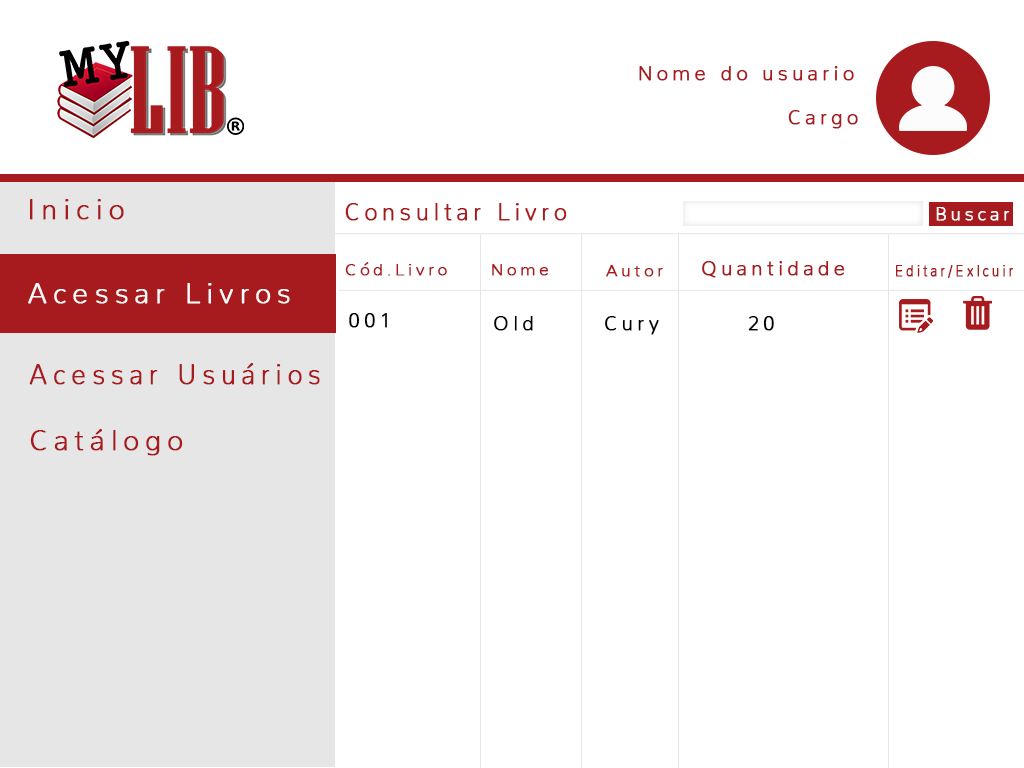
<style>
.page{position:relative;width:1024px;height:768px;background:#ffffff}
.page>*{position:absolute;margin:0}
.t1{font:20px "Nunito-ExtraLight";letter-spacing:0.2em;color:#a71b1e;font-weight:bold}
.t2{font:28px "Nunito-ExtraLight";letter-spacing:0.2em;color:#a71b1e;font-weight:bold}
.t3{font:22.6px "Nunito-ExtraLight";letter-spacing:0.2em;color:#a71b1e;font-weight:bold}
.t4{font:18.1px "Nunito-ExtraLight";letter-spacing:0.2em;color:#fdfdfd;font-weight:bold}
.t5{font:16.3px "Nunito-ExtraLight";letter-spacing:0.2em;color:#a71b1e;font-weight:bold;scale:1.04 1}
.t6{font:16.3px "Nunito-ExtraLight";letter-spacing:0.2em;color:#a71b1e;font-weight:bold;scale:0.82 1}
.t7{font:28px "Nunito-ExtraLight";letter-spacing:0.2em;color:#fbf9f9;font-weight:bold}
.t8{font:20px "Nunito-ExtraLight";letter-spacing:0.2em;color:#010101;font-weight:bold}
.t9{font:28px "Nunito-ExtraLight";letter-spacing:0.2em;color:#a71b1e;font-weight:bold;scale:0.94 1}
</style>
<div class="page">
<p class="t1" style="left:639px;top:66px;width:215px;height:15px">Nome do usuario</p>
<p class="t1" style="left:788px;top:110px;width:70px;height:19px">Cargo</p>
<p class="t2" style="left:30px;top:199px;width:94px;height:21px">Inicio</p>
<p class="t3" style="left:345px;top:203px;width:222px;height:18px">Consultar Livro</p>
<p class="t4" style="left:936px;top:207px;width:74px;height:14px">Buscar</p>
<p class="t5" style="left:345px;top:262px;width:102px;height:14px">Cód.Livro</p>
<p class="t5" style="left:492px;top:264px;width:56px;height:12px">Nome</p>
<p class="t5" style="left:606px;top:265px;width:57px;height:12px">Autor</p>
<p class="t1" style="left:702px;top:261px;width:143px;height:17px">Quantidade</p>
<p class="t6" style="left:896px;top:265px;width:117px;height:13px">Editar/Exlcuir</p>
<p class="t7" style="left:28px;top:283px;width:262px;height:21px">Acessar Livros</p>
<p class="t8" style="left:349px;top:313px;width:38px;height:15px">001</p>
<p class="t8" style="left:494px;top:316px;width:39px;height:15px">Old</p>
<p class="t8" style="left:605px;top:316px;width:54px;height:19px">Cury</p>
<p class="t8" style="left:748px;top:316px;width:26px;height:15px">20</p>
<p class="t9" style="left:29px;top:363px;width:291px;height:22px">Acessar Usuários</p>
<p class="t2" style="left:30px;top:429px;width:153px;height:27px">Catálogo</p>
</div>
